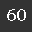
<style>
.page{position:relative;width:32px;height:32px;background:#333333}
.page>*{position:absolute;margin:0}
.t1{font:17.8px "MyriadPro-Regular";color:#ffffff;scale:1.12 1}
</style>
<div class="page">
<p class="t1" style="left:7px;top:9px;width:19px;height:12px">60</p>
</div>
